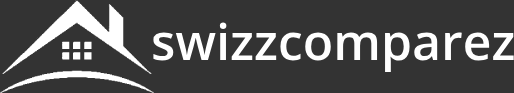
<style>
.page{position:relative;width:514px;height:93px;background:#333333}
.page>*{position:absolute;margin:0}
.t1{font:50px "OpenSans-SemiBold";color:#ffffff}
</style>
<div class="page">
<p class="t1" style="left:153px;top:22px;width:361px;height:50px">swizzcomparez</p>
</div>
